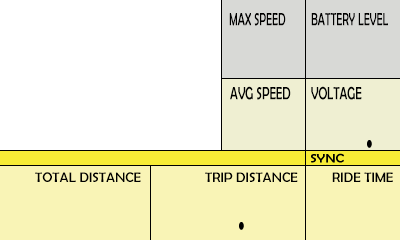
<style>
.page{position:relative;width:400px;height:240px;background:#ffffff}
.page>*{position:absolute;margin:0}
.t1{font:18px "BerlinSansFB-Reg";color:#000000;scale:0.61 1}
.t2{font:18px "BerlinSansFB-Reg";color:#000000;scale:0.66 1}
.t3{font:14px "BerlinSansFB-Reg";color:#000000}
</style>
<div class="page">
<p class="t1" style="left:229px;top:13px;width:57px;height:13px">MAX SPEED</p>
<p class="t1" style="left:311px;top:13px;width:77px;height:13px">BATTERY LEVEL</p>
<p class="t2" style="left:230px;top:86px;width:61px;height:14px">AVG SPEED</p>
<p class="t2" style="left:311px;top:86px;width:51px;height:14px">VOLTAGE</p>
<p class="t3" style="left:35px;top:172px;width:106px;height:10px">TOTAL DISTANCE</p>
<p class="t3" style="left:205px;top:172px;width:93px;height:10px">TRIP DISTANCE</p>
<p class="t3" style="left:332px;top:172px;width:61px;height:10px">RIDE TIME</p>
</div>
